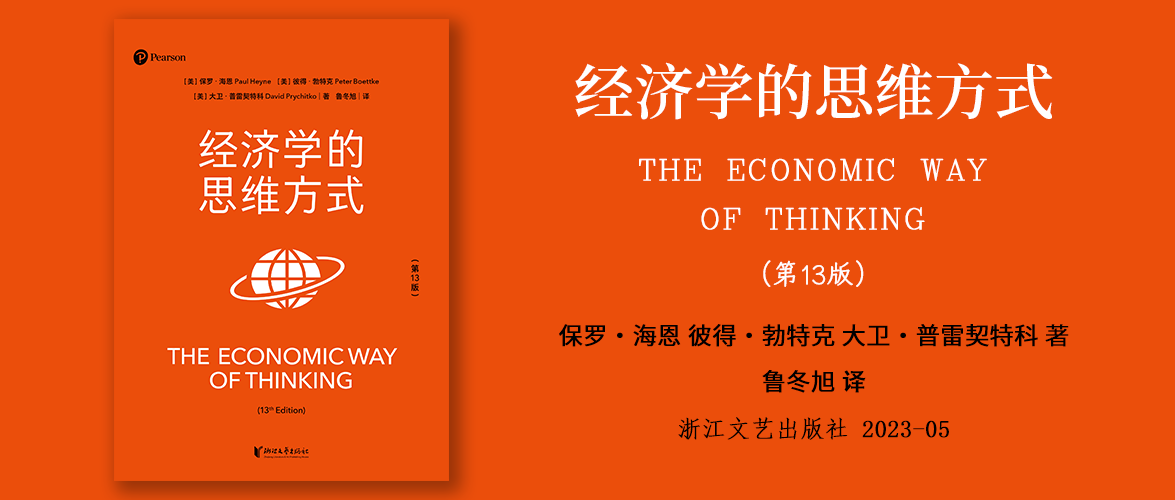
<style>
.page{position:relative;width:1175px;height:500px;background:#eb4e0b}
.page>*{position:absolute;margin:0}
.t1{font:60px "SourceHanSerifSC-SemiBold";color:#ffffff}
.t2{font:28px "Complex";color:#ffffff;font-weight:bold}
.t3{font:28px "TsangerJinKai05-W01";color:#ffffff;font-weight:bold}
.t4{font:24px "SourceHanSansSC-Regular";color:#000000;font-weight:bold}
.t5{font:24px "KozGoPr6N-Regular";color:#000000;font-weight:bold}
.t6{font:24px "AdobeHeitiStd-Regular";color:#000000;font-weight:bold}
.t7{font:12px "FangSong";color:#000000;font-weight:bold}
</style>
<div class="page">
<p class="t1" style="left:575px;top:62px;width:478px;height:58px">经济学的思维方式</p>
<p class="t2" style="left:639px;top:158px;width:348px;height:72px;text-align:center">THE ECONOMIC WAY<br>OF THINKING</p>
<p class="t3" style="left:763px;top:260px;width:101px;height:27px">（第13版）</p>
<p class="t4" style="left:559px;top:324px;width:510px;height:23px">保罗·海恩 彼得·勃特克 大卫·普雷契特科<span class="t5"> 著</span></p>
<p class="t4" style="left:762px;top:370px;width:104px;height:23px">鲁冬旭 <span class="t6">译</span></p>
<p class="t7" style="left:678px;top:417px;width:271px;height:23px;text-align:center">浙江文艺出版社 2023-05</p>
</div>
